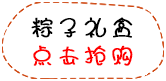
<style>
.page{position:relative;width:166px;height:81px;background:#ffffff}
.page>*{position:absolute;margin:0}
.t1{font:21.7px "HYj2gj";letter-spacing:0.2em;color:#000000;font-weight:bold}
.t2{font:21.7px "HYj2gj";letter-spacing:0.2em;color:#ff0000;font-weight:bold}
</style>
<div class="page">
<p class="t1" style="left:31px;top:17px;width:102px;height:21px">粽子礼盒</p>
<p class="t2" style="left:33px;top:45px;width:100px;height:21px">点击抢购</p>
</div>
